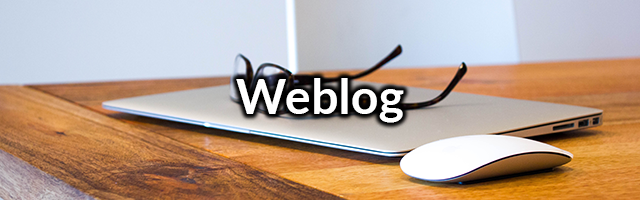
<style>
.page{position:relative;width:640px;height:200px}
.page>*{position:absolute;margin:0}
.t1{font:48px "Lato-Bold";color:#ffffff}
</style>
<div class="page">
<p class="t1" style="left:236px;top:78px;width:168px;height:45px">Weblog</p>
</div>
